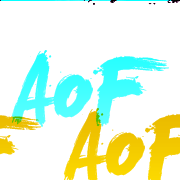
<style>
.page{position:relative;width:180px;height:180px;background:#ffffff}
.page>*{position:absolute;margin:0}
.t1{font:87.6px "LeviReBrushed";color:#42ffff}
</style>
<div class="page">
<p class="t1" style="left:11px;top:49px;width:158px;height:77px">AoF</p>
</div>
